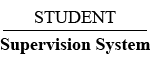
<style>
.page{position:relative;width:150px;height:60px;background:#ffffff}
.page>*{position:absolute;margin:0}
.t1{font:18px "TimesNewRomanPSMT";color:#000000}
.t2{font:18px "TimesNewRomanPS-BoldMT";color:#000000}
</style>
<div class="page">
<p class="t1" style="left:35px;top:11px;width:81px;height:12px">STUDENT</p>
<p class="t2" style="left:0px;top:38px;width:150px;height:16px">Supervision System</p>
</div>
